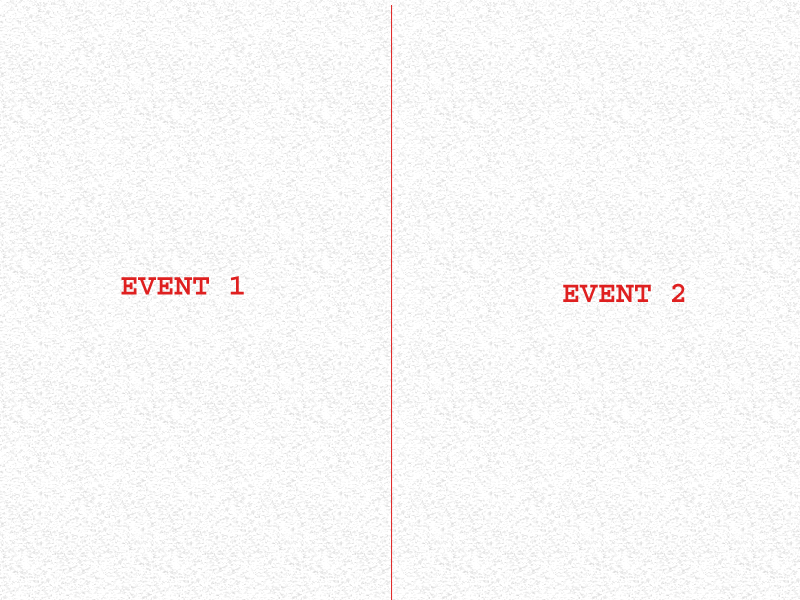
<style>
.page{position:relative;width:800px;height:600px;background:#ffffff}
.page>*{position:absolute;margin:0}
.t1{font:30px "Courier-Bold";color:#df2020}
</style>
<div class="page">
<p class="t1" style="left:121px;top:276px;width:123px;height:19px">EVENT 1</p>
<p class="t1" style="left:563px;top:283px;width:122px;height:19px">EVENT 2</p>
</div>
